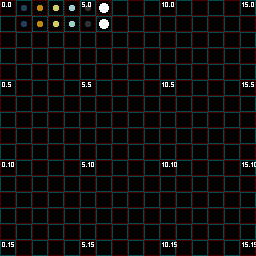
<style>
.page{position:relative;width:256px;height:256px;background:#000000}
.page>*{position:absolute;margin:0}
.t1{font:8px "PixelMillennium";color:#ffffff;text-transform:uppercase}
</style>
<div class="page">
<p class="t1" style="left:2px;top:2px;width:9px;height:5px">0.0</p>
<p class="t1" style="left:82px;top:2px;width:9px;height:5px">5.0</p>
<p class="t1" style="left:162px;top:2px;width:12px;height:5px">10.0</p>
<p class="t1" style="left:242px;top:2px;width:12px;height:5px">15.0</p>
<p class="t1" style="left:2px;top:82px;width:9px;height:5px">0.5</p>
<p class="t1" style="left:82px;top:82px;width:9px;height:5px">5.5</p>
<p class="t1" style="left:162px;top:82px;width:12px;height:5px">10.5</p>
<p class="t1" style="left:242px;top:82px;width:12px;height:5px">15.5</p>
<p class="t1" style="left:2px;top:162px;width:12px;height:5px">0.10</p>
<p class="t1" style="left:82px;top:162px;width:12px;height:5px">5.10</p>
<p class="t1" style="left:162px;top:162px;width:15px;height:5px">10.10</p>
<p class="t1" style="left:242px;top:162px;width:15px;height:5px">15.10</p>
<p class="t1" style="left:2px;top:242px;width:12px;height:5px">0.15</p>
<p class="t1" style="left:82px;top:242px;width:12px;height:5px">5.15</p>
<p class="t1" style="left:162px;top:242px;width:15px;height:5px">10.15</p>
<p class="t1" style="left:242px;top:242px;width:15px;height:5px">15.15</p>
</div>
